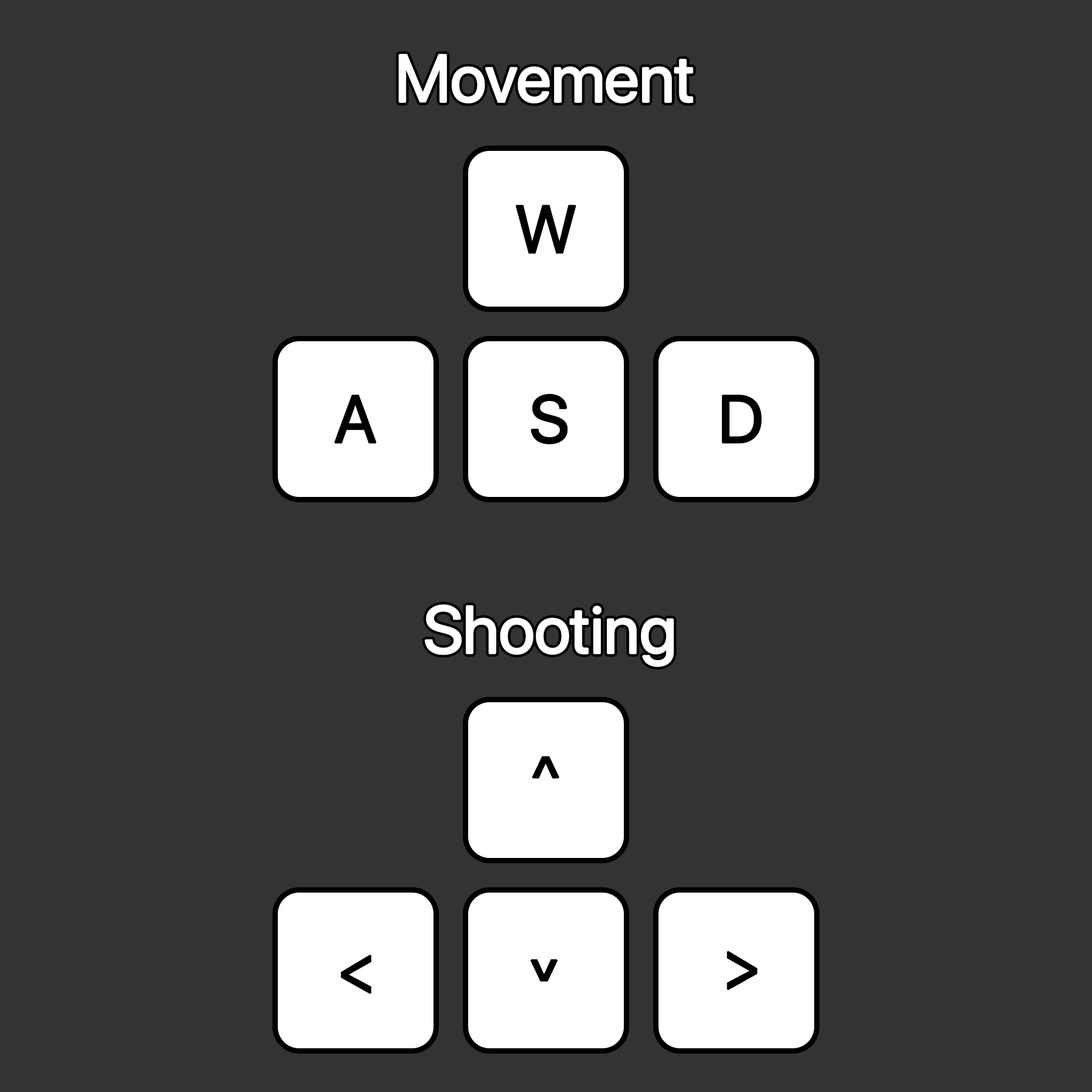
<style>
.page{position:relative;width:1092px;height:1092px;background:#333333}
.page>*{position:absolute;margin:0}
.t1{font:66.6px "SFProDisplay-Regular";letter-spacing:-0.01em;color:#ffffff;font-weight:bold}
.t2{font:66.6px "SFProDisplay-Regular";letter-spacing:-0.01em;color:#000000;font-weight:bold}
</style>
<div class="page">
<p class="t1" style="left:398px;top:54px;width:295px;height:49px">Movement</p>
<p class="t2" style="left:516px;top:205px;width:60px;height:49px">W</p>
<p class="t2" style="left:334px;top:395px;width:42px;height:49px">A</p>
<p class="t2" style="left:531px;top:393px;width:37px;height:52px">S</p>
<p class="t2" style="left:721px;top:395px;width:41px;height:49px">D</p>
<p class="t1" style="left:424px;top:604px;width:250px;height:63px">Shooting</p>
<p class="t2" style="left:532px;top:756px;width:27px;height:22px">^</p>
<p class="t2" style="left:727px;top:951px;width:31px;height:39px">&gt;</p>
<p class="t2" style="left:341px;top:954px;width:31px;height:40px">&lt;</p>
<p class="t2" style="left:530px;top:959px;width:28px;height:23px">^</p>
</div>
